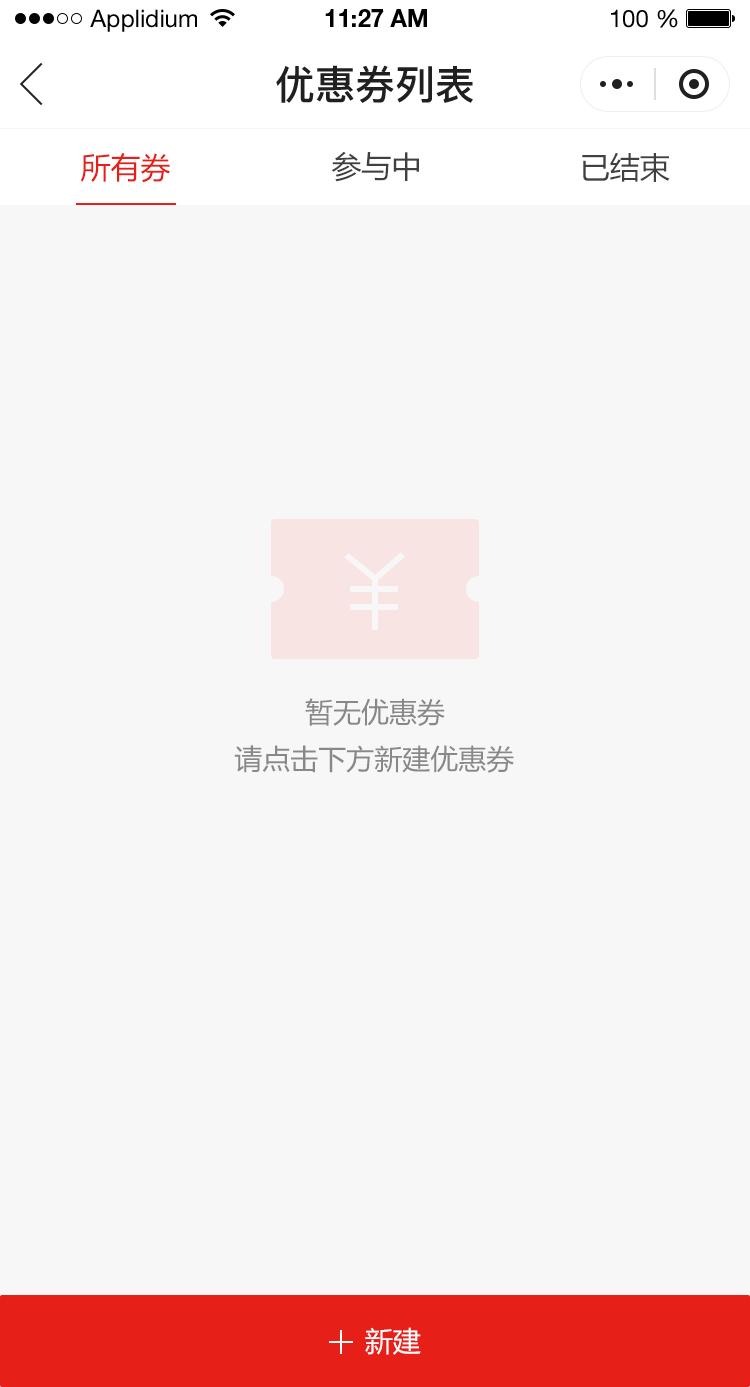
<style>
.page{position:relative;width:750px;height:1387px;background:#f7f7f7}
.page>*{position:absolute;margin:0}
.t1{font:24px "HelveticaNeueLTStd-Roman";color:#000000}
.t2{font:24px "HelveticaNeueLTStd-Bd";color:#000000}
.t3{font:40px "PingFang-SC-Bold";color:#202020;text-transform:uppercase}
.t4{font:30px "MicrosoftYaHei";color:#e61f18;text-transform:uppercase}
.t5{font:30px "MicrosoftYaHei";color:#404040;text-transform:uppercase}
.t6{font:28px "MicrosoftYaHei";color:#888888;text-transform:uppercase}
.t7{font:28px "MicrosoftYaHei";color:#ffffff;text-transform:uppercase}
</style>
<div class="page">
<p class="t1" style="left:90px;top:9px;width:107px;height:23px">Applidium</p>
<p class="t2" style="left:325px;top:9px;width:102px;height:18px">11:27 AM</p>
<p class="t1" style="left:611px;top:9px;width:67px;height:19px">100 %</p>
<p class="t3" style="left:276px;top:65px;width:197px;height:38px">优惠券列表</p>
<p class="t4" style="left:80px;top:153px;width:90px;height:30px">所有券</p>
<p class="t5" style="left:331px;top:151px;width:88px;height:31px">参与中</p>
<p class="t5" style="left:582px;top:152px;width:88px;height:30px">已结束</p>
<p class="t6" style="left:305px;top:698px;width:140px;height:28px">暂无优惠券</p>
<p class="t6" style="left:234px;top:745px;width:280px;height:28px">请点击下方新建优惠券</p>
<p class="t7" style="left:365px;top:1327px;width:56px;height:28px">新建</p>
</div>
